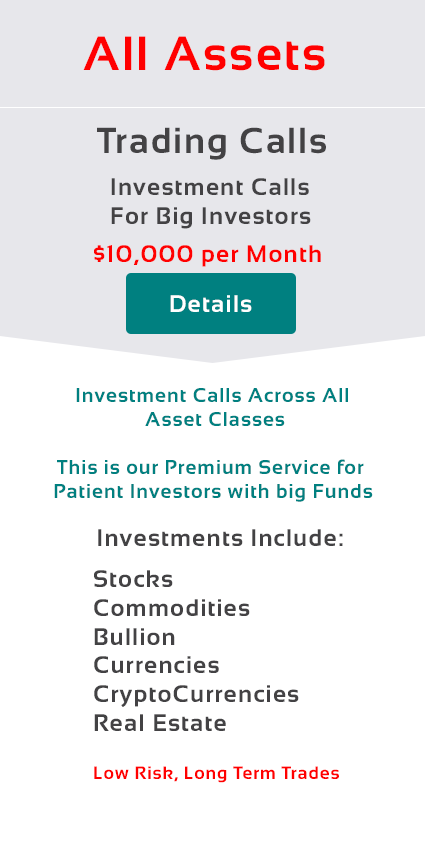
<style>
.page{position:relative;width:425px;height:866px;background:#ffffff}
.page>*{position:absolute;margin:0}
.t1{font:48px "Sansation-Bold";letter-spacing:0.05em;color:#ff0000}
.t2{font:36px "Sansation-Bold";letter-spacing:0.05em;color:#434244}
.t3{font:24px "Sansation-Bold";letter-spacing:0.05em;color:#434244}
.t4{font:24px "Sansation-Bold";letter-spacing:0.05em;color:#ff0000}
.t5{font:24px "Sansation-Bold";letter-spacing:0.05em;color:#ffffff}
.t6{font:20px "Sansation-Bold";letter-spacing:0.05em;color:#008080}
.t7{font:18px "Sansation-Bold";letter-spacing:0.05em;color:#ff0000}
</style>
<div class="page">
<p class="t1" style="left:83px;top:36px;width:242px;height:35px">All Assets</p>
<p class="t2" style="left:97px;top:127px;width:229px;height:33px">Trading Calls</p>
<p class="t3" style="left:111px;top:178px;width:200px;height:51px">Investment Calls<br>For Big Investors</p>
<p class="t4" style="left:94px;top:245px;width:227px;height:22px">$10,000 per Month</p>
<p class="t5" style="left:170px;top:295px;width:82px;height:17px">Details</p>
<p class="t6" style="left:76px;top:388px;width:272px;height:38px;text-align:center">Investment Calls Across All <br>Asset Classes</p>
<p class="t6" style="left:54px;top:459px;width:319px;height:43px;text-align:center">This is our Premium Service for <br>Patient Investors with big Funds</p>
<p class="t3" style="left:98px;top:529px;width:245px;height:17px">Investments Include:</p>
<p class="t3" style="left:94px;top:570px;width:205px;height:161px">Stocks<br>Commodities<br>Bullion<br>Currencies<br>CryptoCurrencies<br>Real Estate</p>
<p class="t7" style="left:94px;top:766px;width:245px;height:17px">Low Risk, Long Term Trades</p>
</div>
